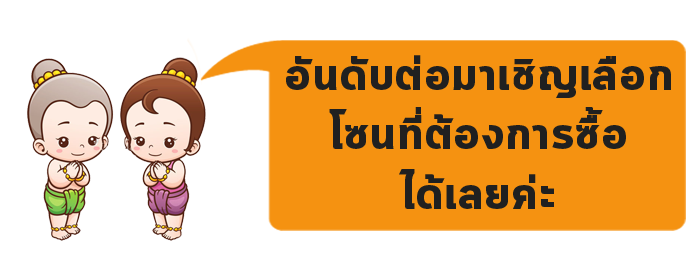
<style>
.page{position:relative;width:700px;height:280px;background:#ffffff}
.page>*{position:absolute;margin:0}
.t1{font:46.9px "Cloud-Bold";letter-spacing:0.01em;color:#202020;scale:1.05 1}
</style>
<div class="page">
<p class="t1" style="left:286px;top:55px;width:385px;height:154px;text-align:center">อันดับต่อมาเชิญเลือก<br>โซนที่ต้องการซื้อ<br>ได้เลยค่ะ</p>
</div>
